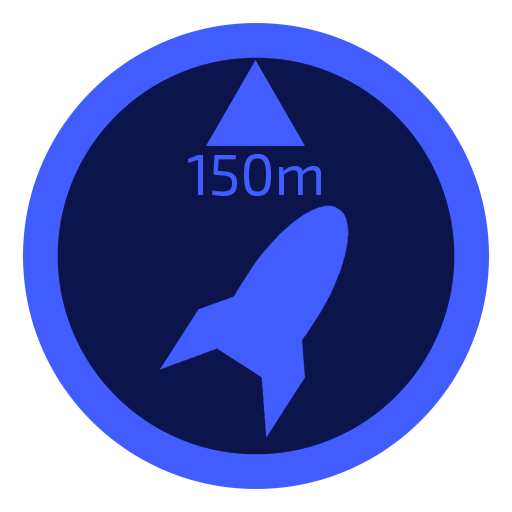
<style>
.page{position:relative;width:512px;height:512px;background:#0c154b}
.page>*{position:absolute;margin:0}
.t1{font:57.6px "Exo2-Regular";color:#425dff}
</style>
<div class="page">
<p class="t1" style="left:188px;top:154px;width:133px;height:42px">150m</p>
</div>
